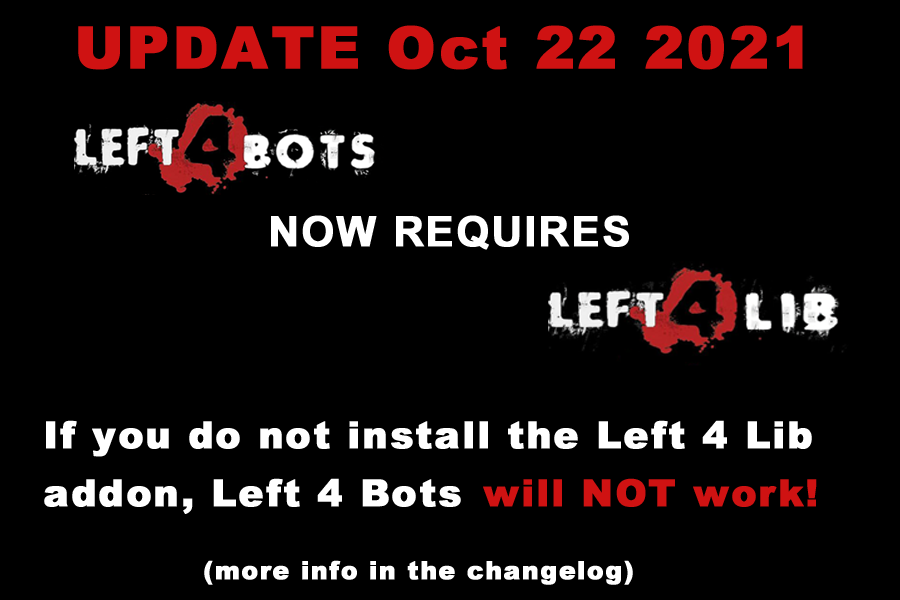
<style>
.page{position:relative;width:900px;height:600px;background:#000000}
.page>*{position:absolute;margin:0}
.t1{font:58.3px "Arial-Black";letter-spacing:0.04em;color:#cf1212;font-weight:bold}
.t2{font:41.7px "Arial-BoldMT";letter-spacing:0.04em;color:#ffffff;font-weight:bold}
.t3{font:37.5px/58.3px "Arial-Black";letter-spacing:0.04em;color:#ffffff;font-weight:bold}
.t4{font:37.5px "Arial-Black";letter-spacing:0.04em;color:#cf1212;font-weight:bold}
.t5{font:25px "Arial-Black";letter-spacing:0.04em;color:#ffffff;font-weight:bold}
</style>
<div class="page">
<p class="t1" style="left:78px;top:25px;width:725px;height:45px">UPDATE Oct 22 2021</p>
<p class="t2" style="left:271px;top:215px;width:358px;height:35px">NOW REQUIRES</p>
<p class="t3" style="left:44px;top:420px;width:768px;height:94px">If you do not install the Left 4 Lib<br>addon, Left 4 Bots</p>
<p class="t4" style="left:483px;top:478px;width:334px;height:29px">will NOT work!</p>
<p class="t5" style="left:204px;top:560px;width:429px;height:25px">(more info in the changelog)</p>
</div>
